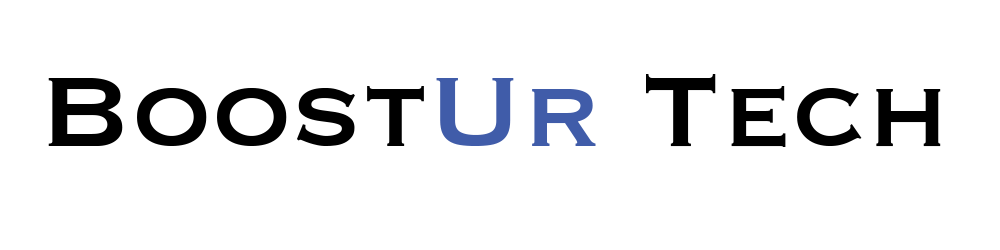
<style>
.page{position:relative;width:1000px;height:250px;background:#ffffff}
.page>*{position:absolute;margin:0}
.t1{font:130px "Copperplate";color:#000000}
.t2{font:130px "Copperplate";color:#405ca9}
</style>
<div class="page">
<p class="t1" style="left:48px;top:74px;width:893px;height:73px">Boost<span class="t2">Ur </span>Tech</p>
</div>
